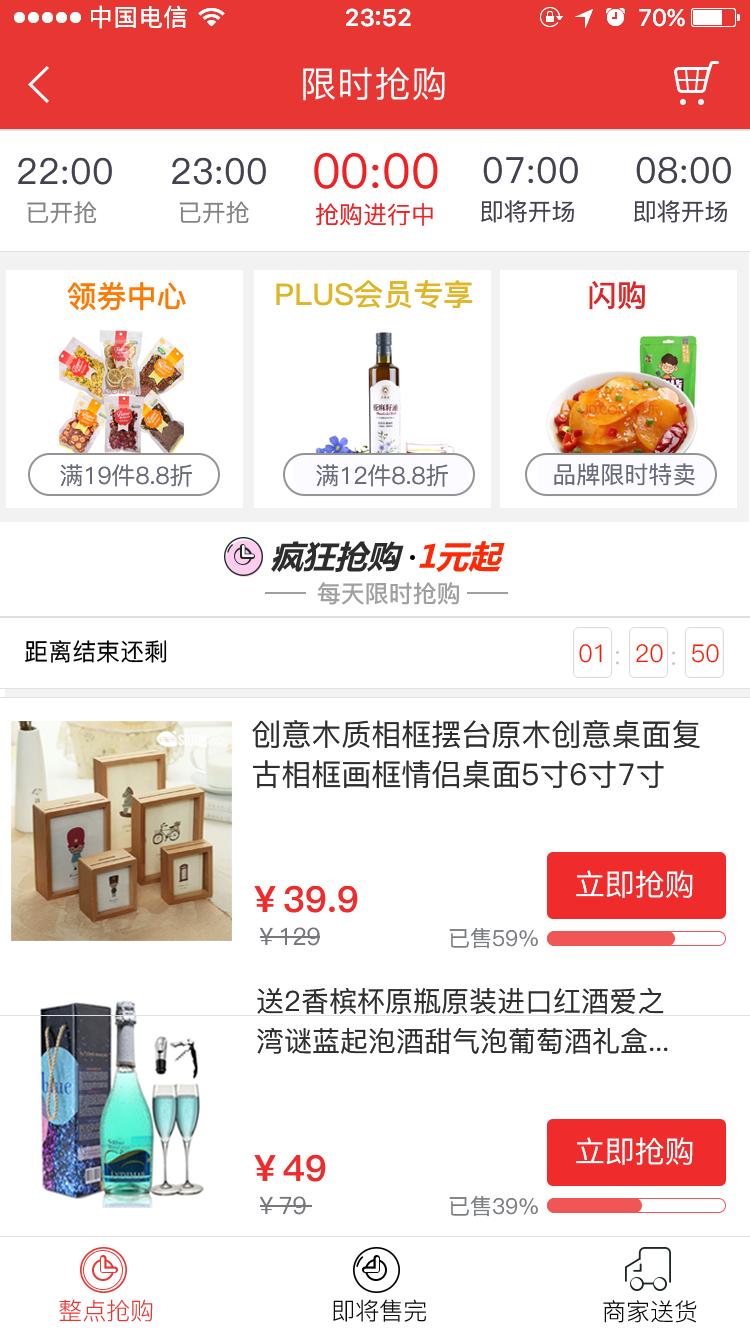
<style>
.page{position:relative;width:750px;height:1334px;background:#ffffff}
.page>*{position:absolute;margin:0}
.t1{font:24px "PingFang-SC-Medium";letter-spacing:0.04em;color:#ffffff}
.t2{font:24px "SFUIText-Semibold";color:#ffffff}
.t3{font:24px "SFUIDisplay-Medium";color:#ffffff}
.t4{font:36px "PingFang-SC-Medium";letter-spacing:0.03em;color:#ffffff}
.t5{font:36px "PingFang-SC-Medium";color:#434251}
.t6{font:36px/47px "PingFang-SC-Medium";color:#434251}
.t7{font:36px/40px "PingFang-SC-Medium";color:#434251}
.t8{font:24px/47px "PingFang-SC-Medium";color:#838383}
.t9{font:48px "PingFang-SC-Medium";color:#f02023}
.t10{font:36px "PingFang-SC-Medium";color:#838383}
.t11{font:30px/40px "PingFang-SC-Regular";color:#838383}
.t12{font:24px/47px "PingFang-SC-Medium";color:#434251}
.t13{font:24px "PingFang-SC-Medium";color:#838383}
.t14{font:24px "PingFang-SC-Medium";color:#f02023}
.t15{font:24px "PingFang-SC-Regular";color:#f02023}
.t16{font:30px "PingFang-SC-Bold";color:#e0b528}
.t17{font:30px "PingFang-SC-Bold";color:#de2728}
.t18{font:30px "PingFang-SC-Bold";color:#ff7900}
.t19{font:24px "PingFang-SC-Medium";color:#686a7a}
.t20{font:32.5px "MicrosoftYaHei-Bold";color:#2c2c2c}
.t21{font:32.5px "MicrosoftYaHei-Bold";color:#fd2a07}
.t22{font:24px "PingFang-SC-Bold";color:#a0a0a0}
.t23{font:24px "PingFang-SC-Medium";color:#000000}
.t24{font:24.3px "PingFang-SC-Regular";color:#fc1a03}
.t25{font:30px/40px "PingFang-SC-Medium";color:#2e2e2e}
.t26{font:30px "PingFang-SC-Medium";color:#ffffff}
.t27{font:36px "PingFang-SC-Heavy";color:#f02b2b}
.t28{font:24px "PingFang-SC-Medium";color:#76787c}
.t29{font:22px "PingFang-SC-Medium";color:#7c7f82}
.t30{font:28px/40px "PingFang-SC-Medium";color:#2e2e2e}
.t31{font:24px "PingFang-SC-Regular";color:#e83632}
.t32{font:24px "PingFang-SC-Regular";color:#0a0a0a}
</style>
<div class="page">
<p class="t1" style="left:91px;top:5px;width:96px;height:24px">中国电信</p>
<p class="t2" style="left:346px;top:8px;width:65px;height:19px">23 52</p>
<p class="t3" style="left:639px;top:8px;width:46px;height:19px">70%</p>
<p class="t4" style="left:303px;top:67px;width:142px;height:34px">限时抢购</p>
<p class="t5" style="left:18px;top:157px;width:94px;height:28px">22:00</p>
<p class="t6" style="left:172px;top:157px;width:94px;height:67px"><span class="t7">2</span>3:00<br> <span class="t8">已开抢</span></p>
<p class="t9" style="left:314px;top:153px;width:124px;height:36px"><span class="t10">  </span>00:00</p>
<p class="t6" style="left:481px;top:156px;width:97px;height:67px"><span class="t11"> </span>07:00<br> <span class="t12">即将开场</span></p>
<p class="t6" style="left:634px;top:156px;width:97px;height:67px"><span class="t11"> </span>08:00<br> <span class="t12">即将开场</span></p>
<p class="t13" style="left:27px;top:201px;width:70px;height:23px">已开抢</p>
<p class="t14" style="left:315px;top:203px;width:118px;height:23px"><span class="t15"> </span>抢购进行中</p>
<p class="t16" style="left:276px;top:280px;width:197px;height:29px">PLUS会员专享</p>
<p class="t17" style="left:589px;top:281px;width:56px;height:29px">闪购</p>
<p class="t18" style="left:67px;top:282px;width:119px;height:29px">领券中心</p>
<p class="t19" style="left:60px;top:464px;width:132px;height:23px">满19件8.8折</p>
<p class="t19" style="left:316px;top:464px;width:132px;height:23px">满12件8.8折</p>
<p class="t19" style="left:554px;top:463px;width:141px;height:23px">品牌限时特卖</p>
<p class="t20" style="left:271px;top:541px;width:234px;height:32px">疯狂抢购  <span class="t21">1元起</span></p>
<p class="t22" style="left:317px;top:582px;width:142px;height:23px">每天限时抢购</p>
<p class="t23" style="left:25px;top:640px;width:142px;height:23px">距离结束还剩</p>
<p class="t24" style="left:579px;top:644px;width:23px;height:19px">01</p>
<p class="t24" style="left:636px;top:644px;width:27px;height:19px">20</p>
<p class="t24" style="left:692px;top:644px;width:27px;height:19px">50</p>
<p class="t25" style="left:252px;top:720px;width:448px;height:68px">创意木质相框摆台原木创意桌面复<br>古相框画框情侣桌面5寸6寸7寸</p>
<p class="t26" style="left:576px;top:870px;width:117px;height:28px">立即抢购</p>
<p class="t27" style="left:254px;top:885px;width:104px;height:28px">￥39.9</p>
<p class="t28" style="left:259px;top:927px;width:61px;height:19px">￥129</p>
<p class="t29" style="left:449px;top:928px;width:89px;height:21px">已售59%</p>
<p class="t30" style="left:257px;top:988px;width:411px;height:66px">送2香槟杯原瓶原装进口红酒爱之<br>湾谜蓝起泡酒甜气泡葡萄酒礼盒...</p>
<p class="t26" style="left:576px;top:1137px;width:117px;height:28px">立即抢购</p>
<p class="t27" style="left:254px;top:1154px;width:72px;height:28px">￥49</p>
<p class="t28" style="left:259px;top:1196px;width:47px;height:19px">￥79</p>
<p class="t29" style="left:449px;top:1196px;width:89px;height:21px">已售39%</p>
<p class="t31" style="left:59px;top:1299px;width:94px;height:23px">整点抢购</p>
<p class="t32" style="left:333px;top:1299px;width:93px;height:23px">即将售完</p>
<p class="t32" style="left:603px;top:1300px;width:94px;height:23px">商家送货</p>
</div>
